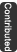
<style>
.page{position:relative;width:17px;height:52px;background:#333333}
.page>*{position:absolute;margin:0}
.t1{font:9px "ArialMT";letter-spacing:0.025em;color:#ffffff}
</style>
<div class="page">
<p class="t1" style="left:4px;top:3px;width:8px;height:48px;rotate:90deg">Contributed</p>
</div>
